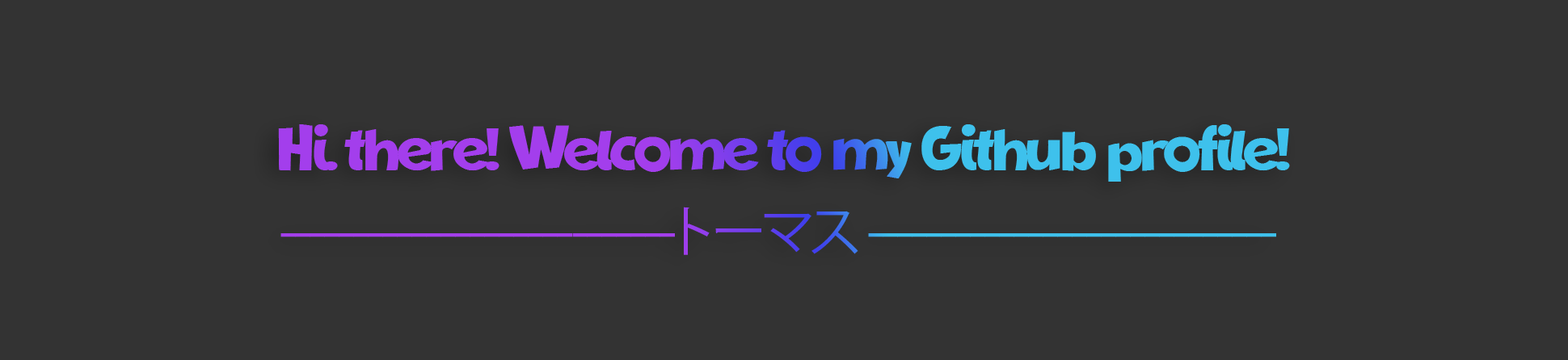
<style>
.page{position:relative;width:1568px;height:360px;background:#333333}
.page>*{position:absolute;margin:0}
.t1{font:72.3px "NewComicBD";letter-spacing:-0.075em}
.t2{font:54.8px "KozGoPr6N-Regular";letter-spacing:-0.075em}
</style>
<div class="page">
<p class="t1" style="left:278px;top:124px;width:1012px;height:58px">Hi. there! Welcome to my Github profile!</p>
<p class="t2" style="left:280px;top:207px;width:996px;height:48px">---------------------------トーマス ----------------------------</p>
</div>
